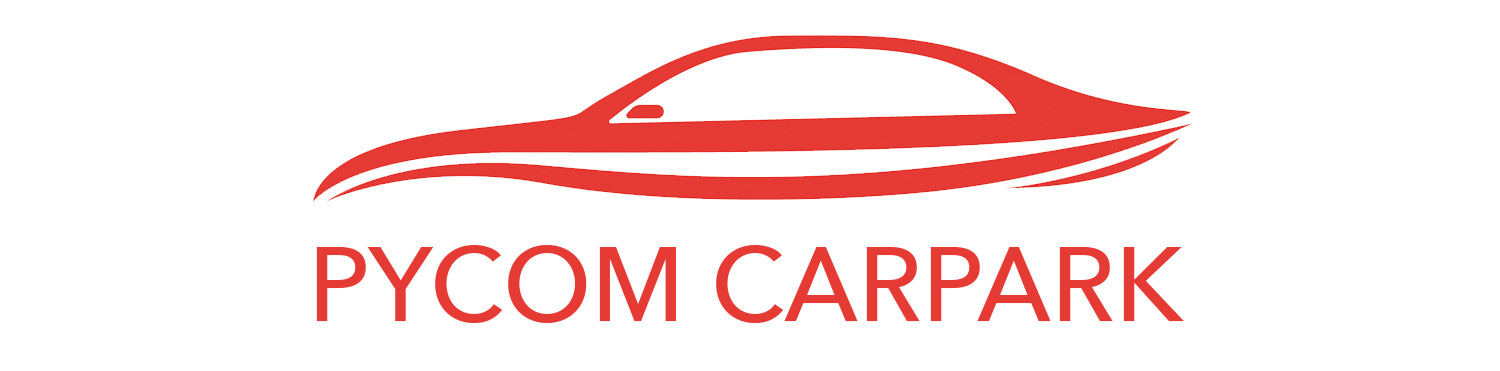
<style>
.page{position:relative;width:1500px;height:371px;background:#ffffff}
.page>*{position:absolute;margin:0}
.t1{font:104.2px "AvenirNext-Medium";color:#e63a35}
</style>
<div class="page">
<p class="t1" style="left:316px;top:245px;width:868px;height:78px">PYCOM CARPARK</p>
</div>
